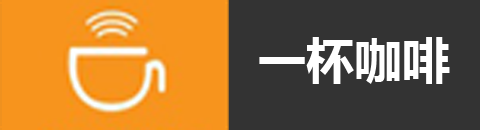
<style>
.page{position:relative;width:480px;height:130px;background:#333333}
.page>*{position:absolute;margin:0}
.t1{font:48px "MicrosoftYaHei-Bold";color:#ffffff}
</style>
<div class="page">
<p class="t1" style="left:259px;top:37px;width:191px;height:47px">一杯咖啡</p>
</div>
